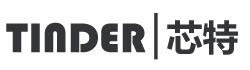
<style>
.page{position:relative;width:250px;height:70px;background:#ffffff}
.page>*{position:absolute;margin:0}
.t1{font:42.9px "Bauhaus93";color:#343538}
.t2{font:36px "MicrosoftYaHei-Bold";color:#343538}
</style>
<div class="page">
<p class="t1" style="left:6px;top:22px;width:140px;height:31px">TINDER</p>
<p class="t2" style="left:167px;top:20px;width:71px;height:35px">芯特</p>
</div>
